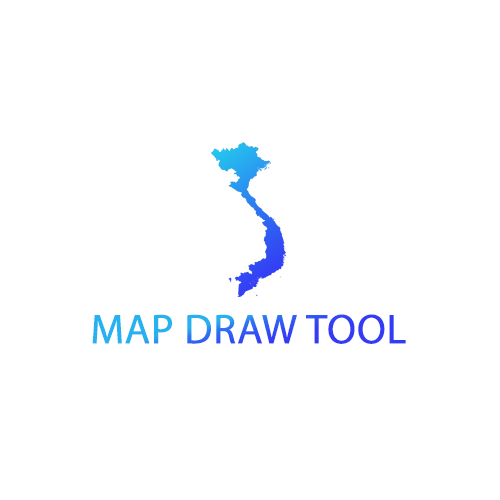
<style>
.page{position:relative;width:500px;height:500px;background:#ffffff}
.page>*{position:absolute;margin:0}
.t1{font:41.7px "MyriadPro-Regular";font-weight:bold}
</style>
<div class="page">
<p class="t1" style="left:92px;top:314px;width:314px;height:30px">MAP DRAW TOOL</p>
</div>
